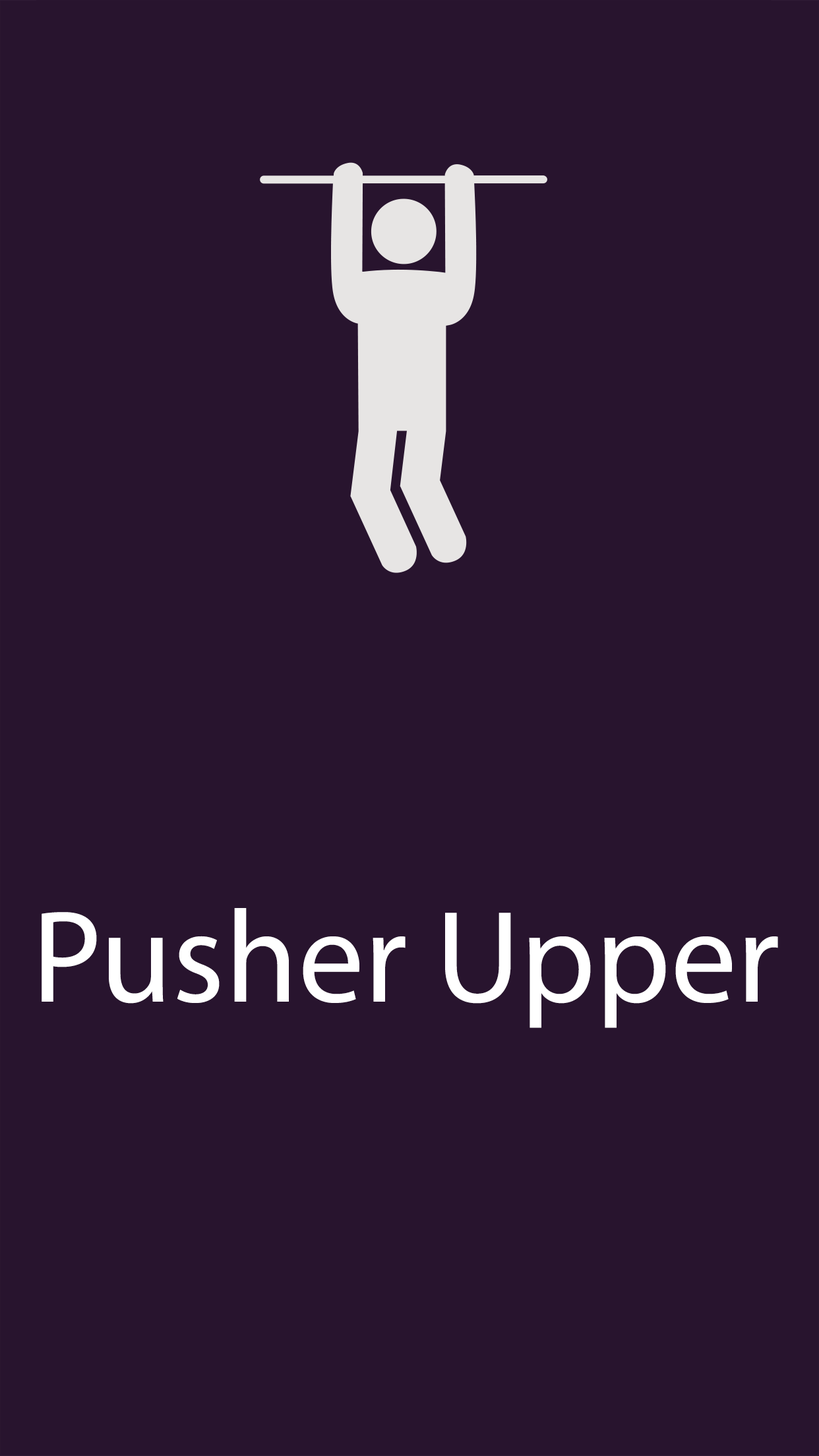
<style>
.page{position:relative;width:819px;height:1456px;background:#28142e}
.page>*{position:absolute;margin:0}
.t1{font:131.9px "MyriadPro-Regular";color:#ffffff}
</style>
<div class="page">
<p class="t1" style="left:42px;top:908px;width:736px;height:120px">Pusher Upper</p>
</div>
